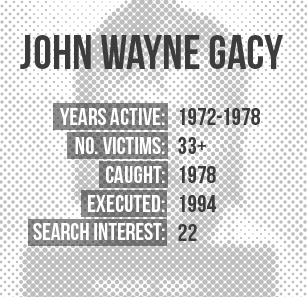
<style>
.page{position:relative;width:307px;height:297px;background:#ffffff}
.page>*{position:absolute;margin:0}
.t1{font:48px "BebasNeue";color:#3c3c3c}
.t2{font:24px "BebasNeue";color:#ffffff}
.t3{font:24px/125px "BebasNeue";color:#ffffff}
.t4{font:24px "BebasNeue";color:#3c3c3c}
.t5{font:24px/125px "BebasNeue";color:#3c3c3c}
</style>
<div class="page">
<p class="t1" style="left:20px;top:35px;width:263px;height:34px">JOHN WAYNE GACY</p>
<p class="t2" style="left:33px;top:108px;width:132px;height:132px;text-align:right"><span class="t3">YEARS ACTIVE:<br></span>No. Victims:<br>cAUGHT:<br>EXECUTED:<br>SEARCH INTEREST:</p>
<p class="t4" style="left:178px;top:108px;width:82px;height:133px"><span class="t5">1972-1978<br></span>33+<br>1978<br>1994<br>22</p>
</div>
